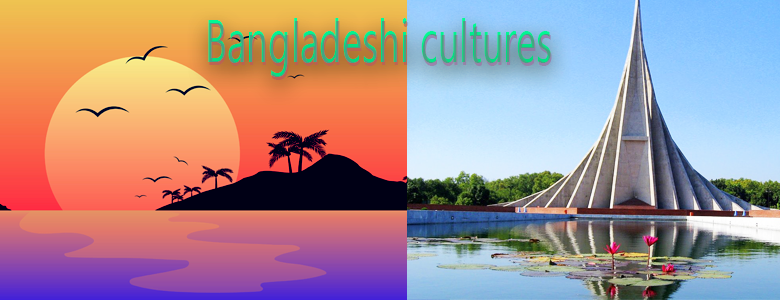
<style>
.page{position:relative;width:780px;height:300px}
.page>*{position:absolute;margin:0}
.t1{font:60px "NirmalaUI";scale:0.64 1}
</style>
<div class="page">
<p class="t1" style="left:208px;top:18px;width:343px;height:59px">Bangladeshi cultures</p>
</div>
